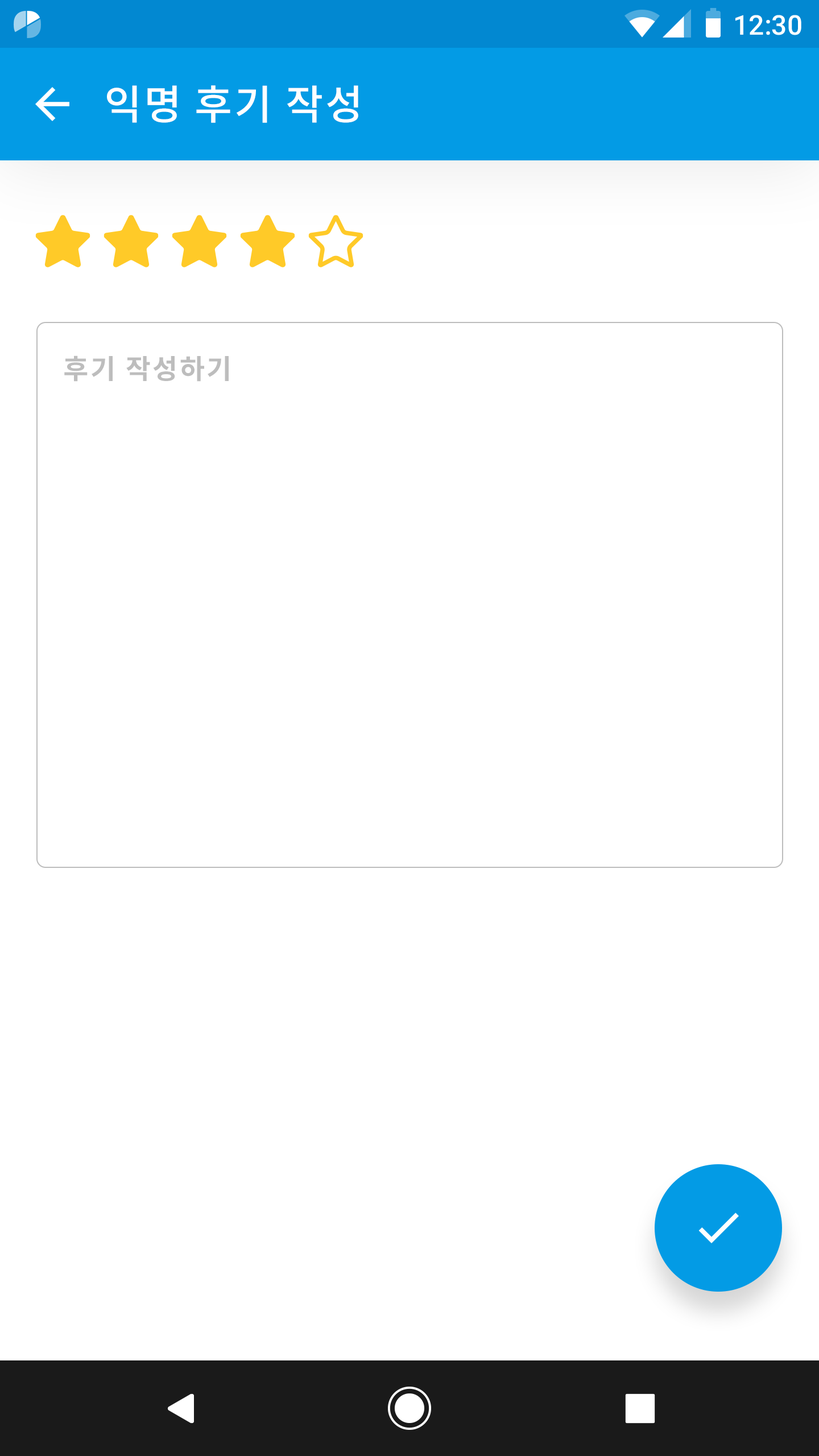
<style>
.page{position:relative;width:819px;height:1456px;background:#ffffff}
.page>*{position:absolute;margin:0}
.t1{font:27.3px "Roboto-Medium";color:#ffffff}
.t2{font:40.9px "NotoSansCJKkr-Medium";letter-spacing:0.05em;color:#ffffff}
.t3{font:27.3px "NotoSansCJKkr-Bold";letter-spacing:0.072em;color:#bdbdbd}
</style>
<div class="page">
<p class="t1" style="left:735px;top:15px;width:66px;height:20px">12:30</p>
<p class="t2" style="left:107px;top:85px;width:251px;height:38px">익명 후기 작성</p>
<p class="t3" style="left:64px;top:355px;width:165px;height:27px">후기 작성하기</p>
</div>
